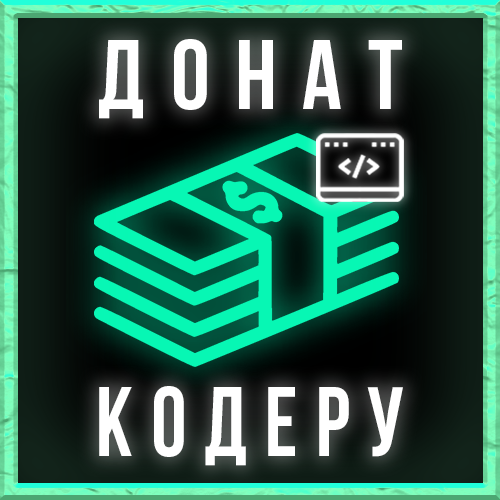
<style>
.page{position:relative;width:500px;height:500px}
.page>*{position:absolute;margin:0}
.t1{font:98px "BebasNeueBold";letter-spacing:0.26em;color:#ffffff}
.t2{font:98px "BebasNeueBold";letter-spacing:0.2em;color:#ffffff;scale:0.91 1}
</style>
<div class="page">
<p class="t1" style="left:99px;top:39px;width:303px;height:80px">донат</p>
<p class="t2" style="left:99px;top:386px;width:304px;height:80px">кодеру</p>
</div>
